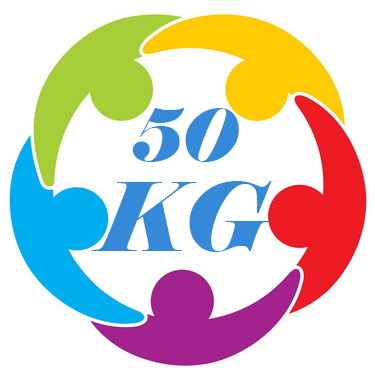
<style>
.page{position:relative;width:375px;height:368px;background:#ffffff}
.page>*{position:absolute;margin:0}
.t1{font:72px "Elephant-Italic";color:#3489d9}
.t2{font:95px "Elephant-Italic";color:#3489d9}
</style>
<div class="page">
<p class="t1" style="left:132px;top:108px;width:107px;height:54px">50</p>
<p class="t2" style="left:91px;top:181px;width:181px;height:71px">KG</p>
</div>
